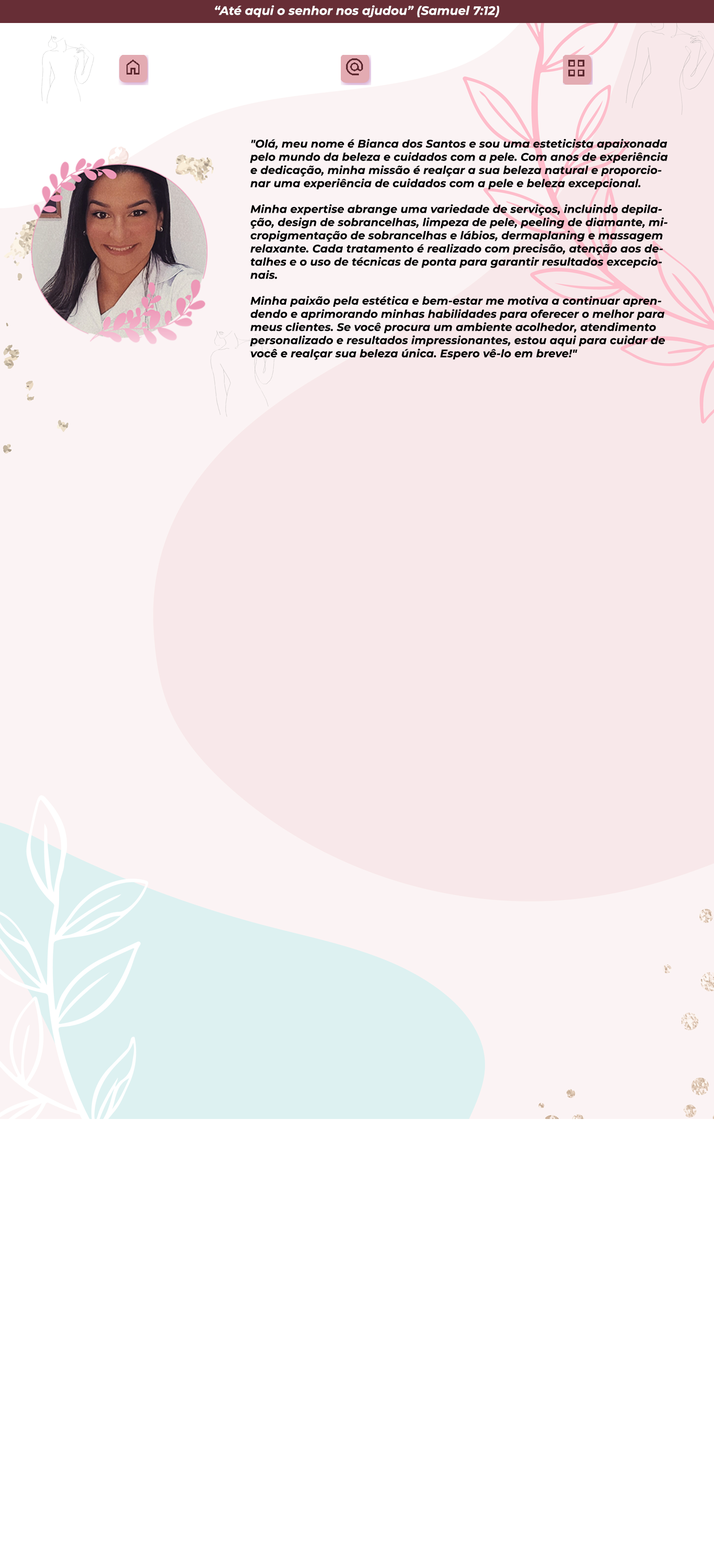
<style>
.page{position:relative;width:714px;height:1568px;background:#ffffff}
.page>*{position:absolute;margin:0}
.t1{font:12px "MontserratItalic-BoldItalic";letter-spacing:0.005em;color:#feffff}
.t2{font:11px "MontserratItalic-BoldItalic";letter-spacing:0.005em;color:#000000}
</style>
<div class="page">
<p class="t1" style="left:215px;top:5px;width:284px;height:13px">“Até aqui o senhor nos ajudou” (Samuel 7:12)</p>
<p class="t2" style="left:250px;top:139px;width:418px;height:221px">"Olá, meu nome é Bianca dos Santos e sou uma esteticista apaixonada pelo mundo da beleza e cuidados com a pele. Com anos de experiência e dedicação, minha missão é realçar a sua beleza natural e proporcionar uma experiência de cuidados com a pele e beleza excepcional.<br><br>Minha expertise abrange uma variedade de serviços, incluindo depilação, design de sobrancelhas, limpeza de pele, peeling de diamante, micropigmentação de sobrancelhas e lábios, dermaplaning e massagem relaxante. Cada tratamento é realizado com precisão, atenção aos detalhes e o uso de técnicas de ponta para garantir resultados excepcionais.<br><br>Minha paixão pela estética e bem-estar me motiva a continuar aprendendo e aprimorando minhas habilidades para oferecer o melhor para meus clientes. Se você procura um ambiente acolhedor, atendimento personalizado e resultados impressionantes, estou aqui para cuidar de você e realçar sua beleza única. Espero vê-lo em breve!"</p>
</div>
